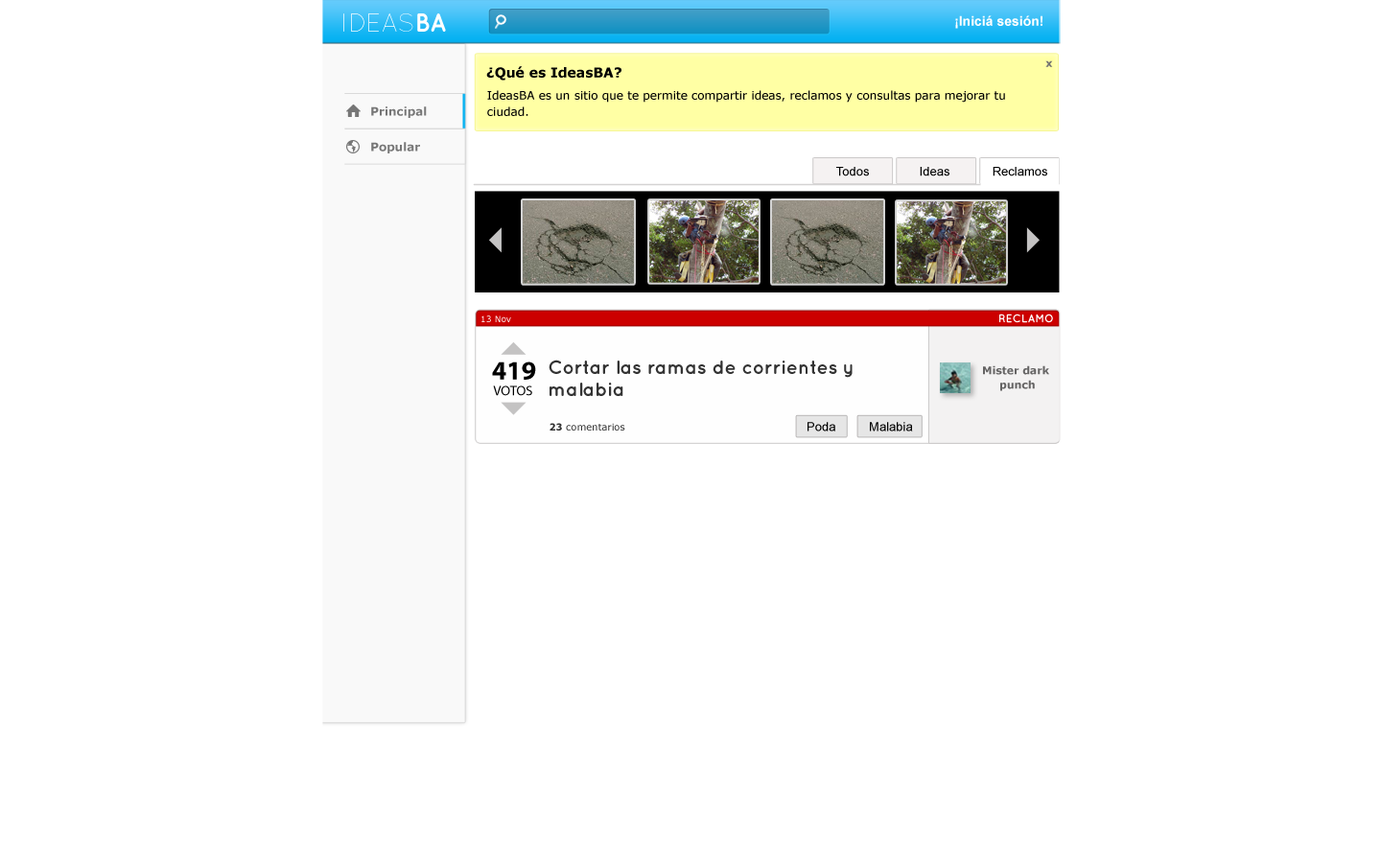
<style>
.page{position:relative;width:1381px;height:863px;background:#ffffff}
.page>*{position:absolute;margin:0}
.t1{font:25.9px "QuicksandLight-Regular";color:#ffffff}
.t2{font:25.9px "QuicksandBold-Regular";color:#ffffff}
.t3{font:13.4px "Arial-BoldMT";color:#ffffff}
.t4{font:10.6px "Verdana-Bold";color:#727272}
.t5{font:13.4px "Verdana-Bold";color:#010101}
.t6{font:11.5px/16.3px "Verdana";color:#010101}
.t7{font:11.5px "Verdana-Bold";color:#767676}
.t8{font:12.5px "ArialMT";color:#000000}
.t9{font:8.6px "Verdana"}
.t10{font:11.5px "QuicksandBold-Regular";color:#ffffff}
.t11{font:37.3px "MyriadArabic-Bold";color:#000000}
.t12{font:19.1px/22px "QuicksandBold-Regular";color:#333333}
.t13{font:10.5px/14.4px "Verdana-Bold";color:#656464}
.t14{font:19.1px "MyriadArabic-Regular";color:#000000}
.t15{font:9.6px "Verdana";color:#333333}
.t16{font:9.6px "Verdana-Bold";color:#333333}
</style>
<div class="page">
<p class="t1" style="left:343px;top:13px;width:103px;height:19px">IDEAS<span class="t2">BA</span></p>
<p class="t3" style="left:955px;top:15px;width:88px;height:14px">¡Iniciá sesión!</p>
<p class="t4" style="left:1046px;top:60px;width:7px;height:7px">x</p>
<p class="t5" style="left:486px;top:66px;width:136px;height:15px">¿Qué es IdeasBA?</p>
<p class="t6" style="left:487px;top:90px;width:518px;height:26px">IdeasBA es un sitio que te permite compartir ideas, reclamos y consultas para mejorar tu <br>ciudad.</p>
<p class="t7" style="left:371px;top:106px;width:56px;height:12px">Principal</p>
<p class="t7" style="left:371px;top:142px;width:49px;height:11px">Popular</p>
<p class="t8" style="left:836px;top:167px;width:33px;height:9px">Todos</p>
<p class="t8" style="left:920px;top:167px;width:30px;height:9px">Ideas</p>
<p class="t8" style="left:993px;top:167px;width:54px;height:9px">Reclamos</p>
<p class="t9" style="left:482px;top:316px;width:29px;height:6px">13 Nov</p>
<p class="t10" style="left:999px;top:314px;width:54px;height:9px">RECLAMO</p>
<p class="t11" style="left:492px;top:362px;width:44px;height:18px">419</p>
<p class="t12" style="left:549px;top:360px;width:304px;height:36px">Cortar las ramas de corrientes y <br>malabia</p>
<p class="t13" style="left:983px;top:365px;width:66px;height:26px;text-align:center">Mister dark <br>punch</p>
<p class="t14" style="left:493px;top:386px;width:39px;height:10px">VOTOS</p>
<p class="t15" style="left:550px;top:423px;width:75px;height:8px"><span class="t16">23</span> comentarios</p>
<p class="t8" style="left:808px;top:422px;width:27px;height:10px">Poda</p>
<p class="t8" style="left:870px;top:422px;width:43px;height:10px">Malabia</p>
</div>
